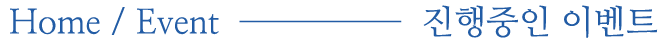
<style>
.page{position:relative;width:668px;height:46px;background:#ffffff}
.page>*{position:absolute;margin:0}
.t1{font:34px "NanumMyeongjo";color:#225ca5}
</style>
<div class="page">
<p class="t1" style="left:10px;top:5px;width:648px;height:33px">Home / Event  ─────  진행중인 이벤트</p>
</div>
